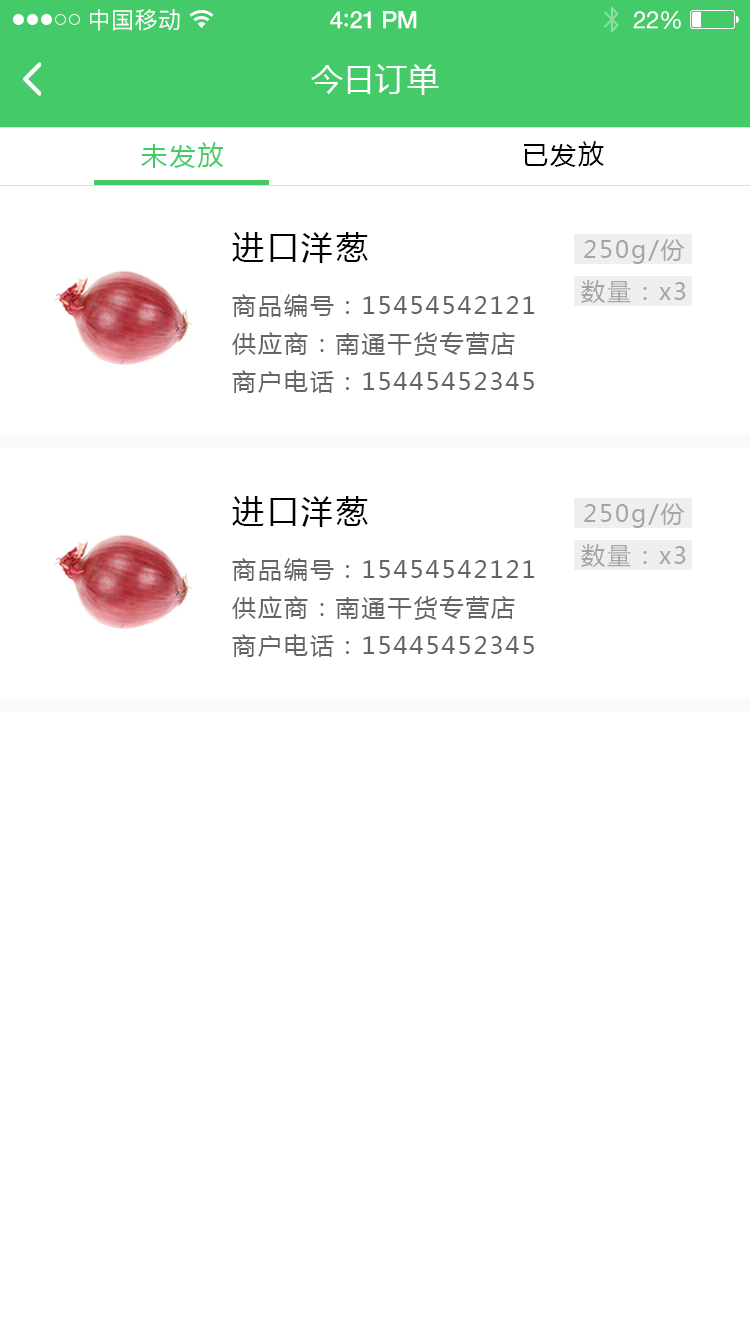
<style>
.page{position:relative;width:750px;height:1334px;background:#ffffff}
.page>*{position:absolute;margin:0}
.t1{font:23px "PingFangSC-Regular";letter-spacing:0.02em;color:#ffffff}
.t2{font:24px "HelveticaNeue-Medium";letter-spacing:-0.02em;color:#ffffff}
.t3{font:26px "Avenir-Medium";letter-spacing:-0.02em;color:#ffffff}
.t4{font:24px "HelveticaNeue";letter-spacing:-0.02em;color:#ffffff}
.t5{font:32px "MicrosoftYaHei";color:#ffffff;text-transform:uppercase}
.t6{font:26px "MicrosoftYaHei";letter-spacing:0.08em;color:#44ca68;text-transform:uppercase}
.t7{font:26px "MicrosoftYaHei";letter-spacing:0.08em;color:#000000;text-transform:uppercase}
.t8{font:32px "MicrosoftYaHei";letter-spacing:0.08em;color:#000000;text-transform:uppercase}
.t9{font:24px "MicrosoftYaHei";letter-spacing:0.08em;color:#a5a5a5}
.t10{font:24px "MicrosoftYaHei";letter-spacing:0.08em;color:#656565;text-transform:uppercase}
</style>
<div class="page">
<p class="t1" style="left:90px;top:9px;width:90px;height:22px">中国移动</p>
<p class="t2" style="left:330px;top:11px;width:87px;height:18px">4<span class="t3">:</span>21 PM</p>
<p class="t4" style="left:633px;top:11px;width:48px;height:18px">22%</p>
<p class="t5" style="left:311px;top:64px;width:128px;height:31px">今日订单</p>
<p class="t6" style="left:141px;top:142px;width:83px;height:26px">未发放</p>
<p class="t7" style="left:524px;top:141px;width:80px;height:26px">已发放</p>
<p class="t8" style="left:232px;top:232px;width:136px;height:31px">进口洋葱</p>
<p class="t9" style="left:584px;top:239px;width:101px;height:25px">250g/份</p>
<p class="t9" style="left:581px;top:280px;width:105px;height:23px">数量：x3</p>
<p class="t10" style="left:232px;top:294px;width:303px;height:23px">商品编号：15454542121</p>
<p class="t10" style="left:232px;top:332px;width:283px;height:24px">供应商：南通干货专营店</p>
<p class="t10" style="left:232px;top:370px;width:302px;height:23px">商户电话：15445452345</p>
<p class="t8" style="left:232px;top:496px;width:136px;height:31px">进口洋葱</p>
<p class="t9" style="left:584px;top:503px;width:101px;height:25px">250g/份</p>
<p class="t9" style="left:581px;top:544px;width:105px;height:23px">数量：x3</p>
<p class="t10" style="left:232px;top:558px;width:303px;height:23px">商品编号：15454542121</p>
<p class="t10" style="left:232px;top:596px;width:283px;height:24px">供应商：南通干货专营店</p>
<p class="t10" style="left:232px;top:634px;width:302px;height:23px">商户电话：15445452345</p>
</div>
